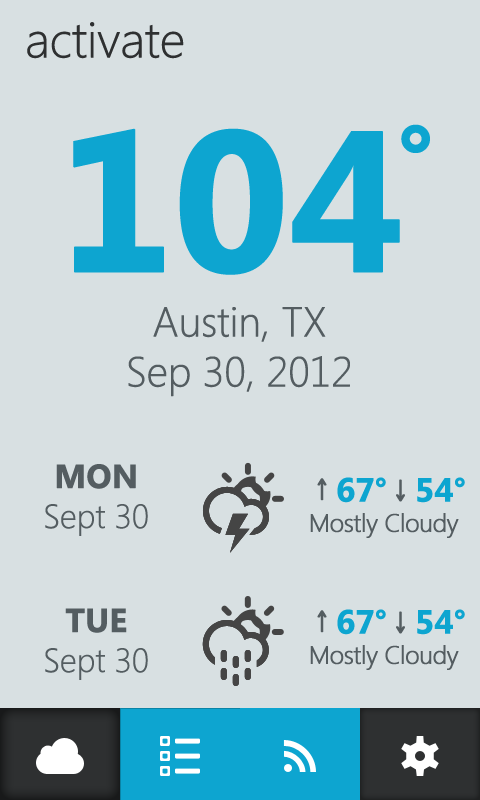
<style>
.page{position:relative;width:480px;height:800px;background:#d8e0e2}
.page>*{position:absolute;margin:0}
.t1{font:50px "SegoeUI-Light";letter-spacing:-0.025em;color:#2e3031;font-weight:bold}
.t2{font:100px "SegoeUI-Bold";letter-spacing:-0.025em;color:#0da5d0;font-weight:bold}
.t3{font:200px "SegoeUI-Bold";letter-spacing:-0.025em;color:#0da5d0;font-weight:bold}
.t4{font:41.7px "SegoeUI-Light";letter-spacing:-0.025em;color:#545d61;font-weight:bold}
.t5{font:33.3px "SegoeUI-Light";letter-spacing:-0.025em;color:#545d61;font-weight:bold}
.t6{font:33.3px "SegoeUI-Bold";letter-spacing:-0.025em;color:#545d61;font-weight:bold}
.t7{font:25px "SegoeUI-Light";letter-spacing:-0.025em;color:#545d61;font-weight:bold}
.t8{font:33.3px "SegoeUI-Bold";letter-spacing:-0.025em;color:#0da5d0;font-weight:bold}
.t9{font:25px "Comfortaa";letter-spacing:-0.025em;color:#545d61;font-weight:bold}
</style>
<div class="page">
<p class="t1" style="left:27px;top:22px;width:157px;height:37px">activate</p>
<p class="t2" style="left:401px;top:124px;width:29px;height:29px">°</p>
<p class="t3" style="left:73px;top:128px;width:327px;height:147px">104</p>
<p class="t4" style="left:128px;top:307px;width:222px;height:90px;text-align:center">Austin, TX<br>Sep 30, 2012</p>
<p class="t5" style="left:45px;top:464px;width:103px;height:72px;text-align:center"><span class="t6">MON<br></span>Sept 30</p>
<p class="t7" style="left:310px;top:477px;width:155px;height:61px;text-align:right"><span class="t8">67°   54°<br></span>Mostly Cloudy</p>
<p class="t9" style="left:317px;top:478px;width:10px;height:23px">↑</p>
<p class="t9" style="left:396px;top:479px;width:9px;height:23px;rotate:180deg">↑</p>
<p class="t5" style="left:45px;top:608px;width:103px;height:72px;text-align:center"><span class="t6">TUE<br></span>Sept 30</p>
<p class="t7" style="left:310px;top:609px;width:155px;height:61px;text-align:right"><span class="t8">67°   54°<br></span>Mostly Cloudy</p>
<p class="t9" style="left:317px;top:610px;width:10px;height:23px">↑</p>
<p class="t9" style="left:396px;top:611px;width:9px;height:23px;rotate:180deg">↑</p>
</div>
